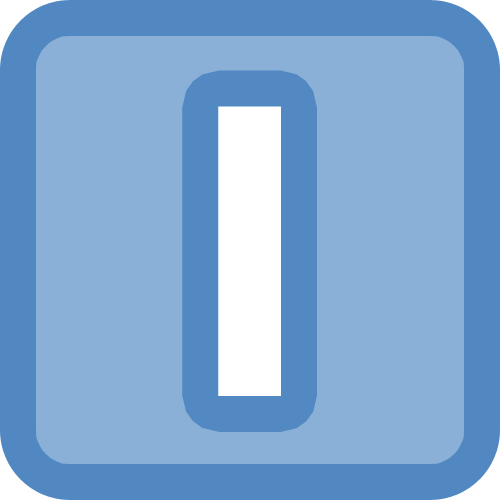
<style>
.page{position:relative;width:500px;height:500px;background:#8ab0d7}
.page>*{position:absolute;margin:0}
.t1{font:404px "ArialMT";color:#ffffff;scale:1.63 1}
</style>
<div class="page">
<p class="t1" style="left:218px;top:106px;width:63px;height:290px">I</p>
</div>
